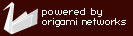
<style>
.page{position:relative;width:133px;height:36px;background:#3b0501}
.page>*{position:absolute;margin:0}
.t1{font:8px "Standard0751";letter-spacing:-0.025em;color:#fbfbfb}
.t2{font:8px "Standard0751";letter-spacing:0.025em;color:#fbfbfb}
</style>
<div class="page">
<p class="t1" style="left:42px;top:8px;width:84px;height:19px"><span class="t2">powered by<br></span>origami networks</p>
</div>
